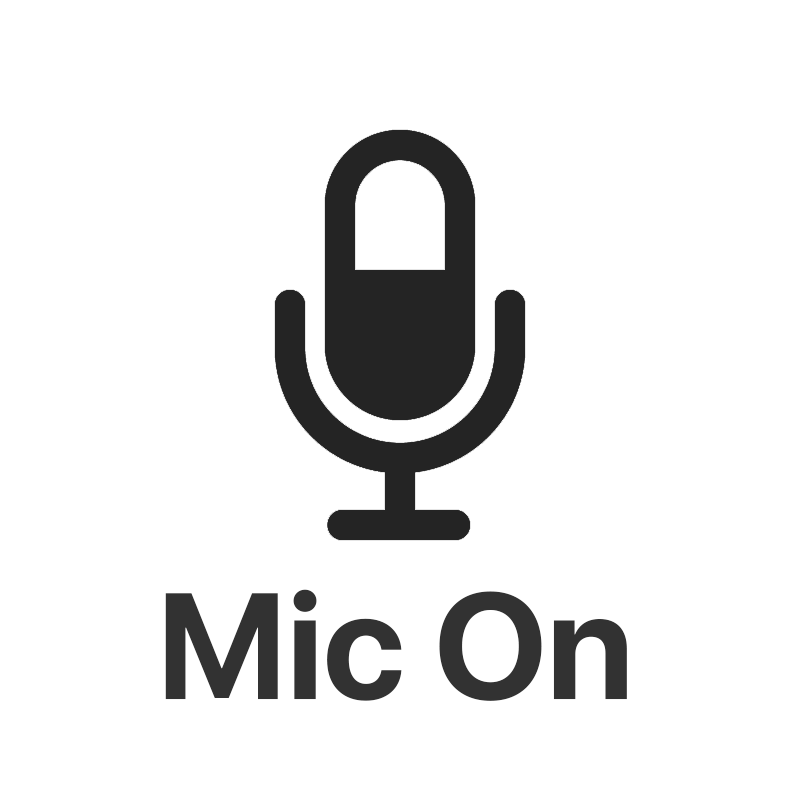
<style>
.page{position:relative;width:800px;height:800px;background:#ffffff}
.page>*{position:absolute;margin:0}
.t1{font:150px "SFProDisplay-Bold";color:#323232}
</style>
<div class="page">
<p class="t1" style="left:165px;top:589px;width:462px;height:112px">Mic On</p>
</div>
